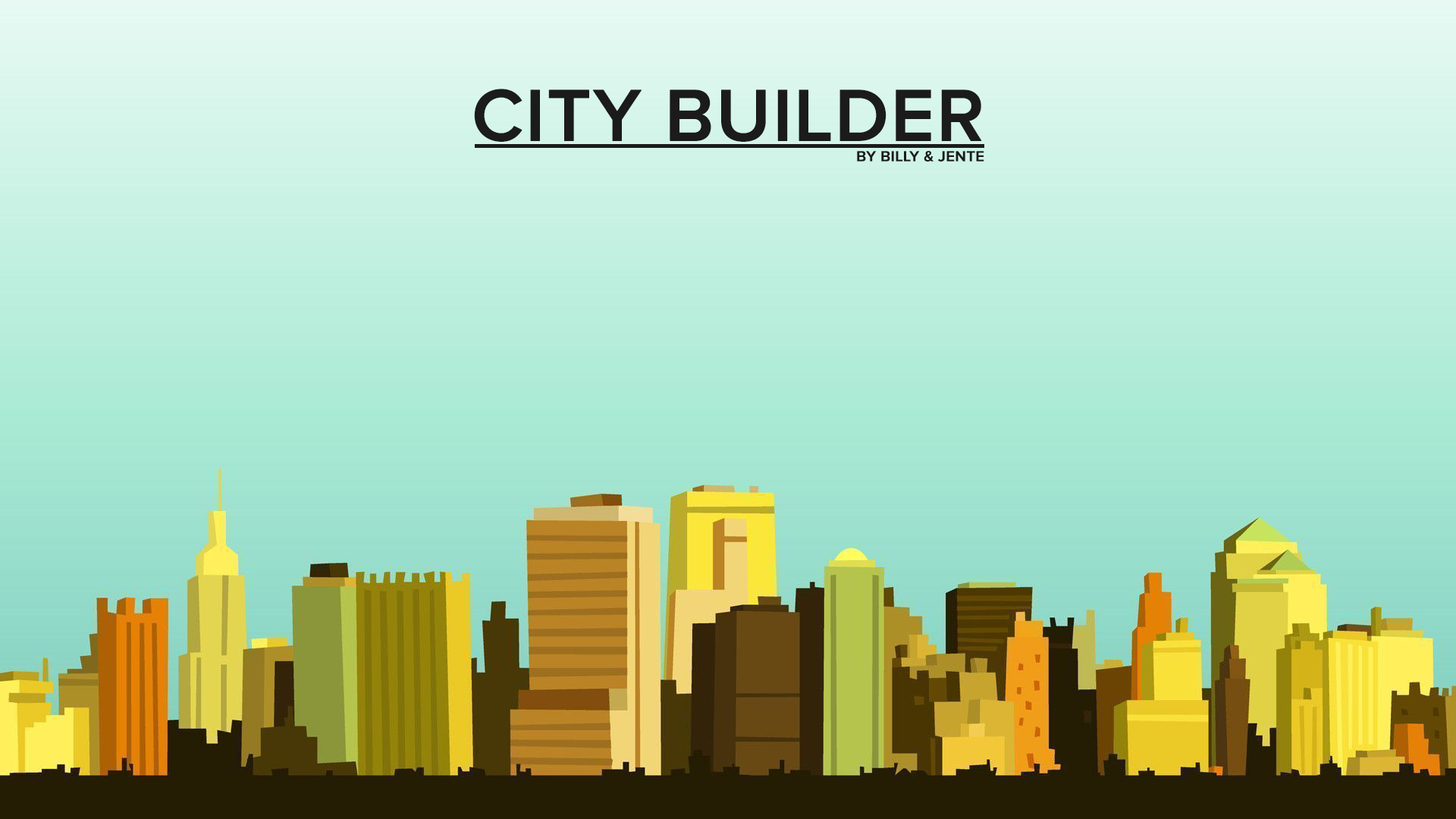
<style>
.page{position:relative;width:1456px;height:819px}
.page>*{position:absolute;margin:0}
.t1{font:75.8px "ProximaNova-Semibold";color:#1b1b1b;font-weight:bold}
.t2{font:15.2px "ProximaNova-Semibold";color:#1b1b1b;font-weight:bold}
</style>
<div class="page">
<p class="t1" style="left:474px;top:89px;width:508px;height:53px">CITY BUILDER</p>
<p class="t2" style="left:857px;top:151px;width:127px;height:11px">BY BILLY &amp; JENTE</p>
</div>
